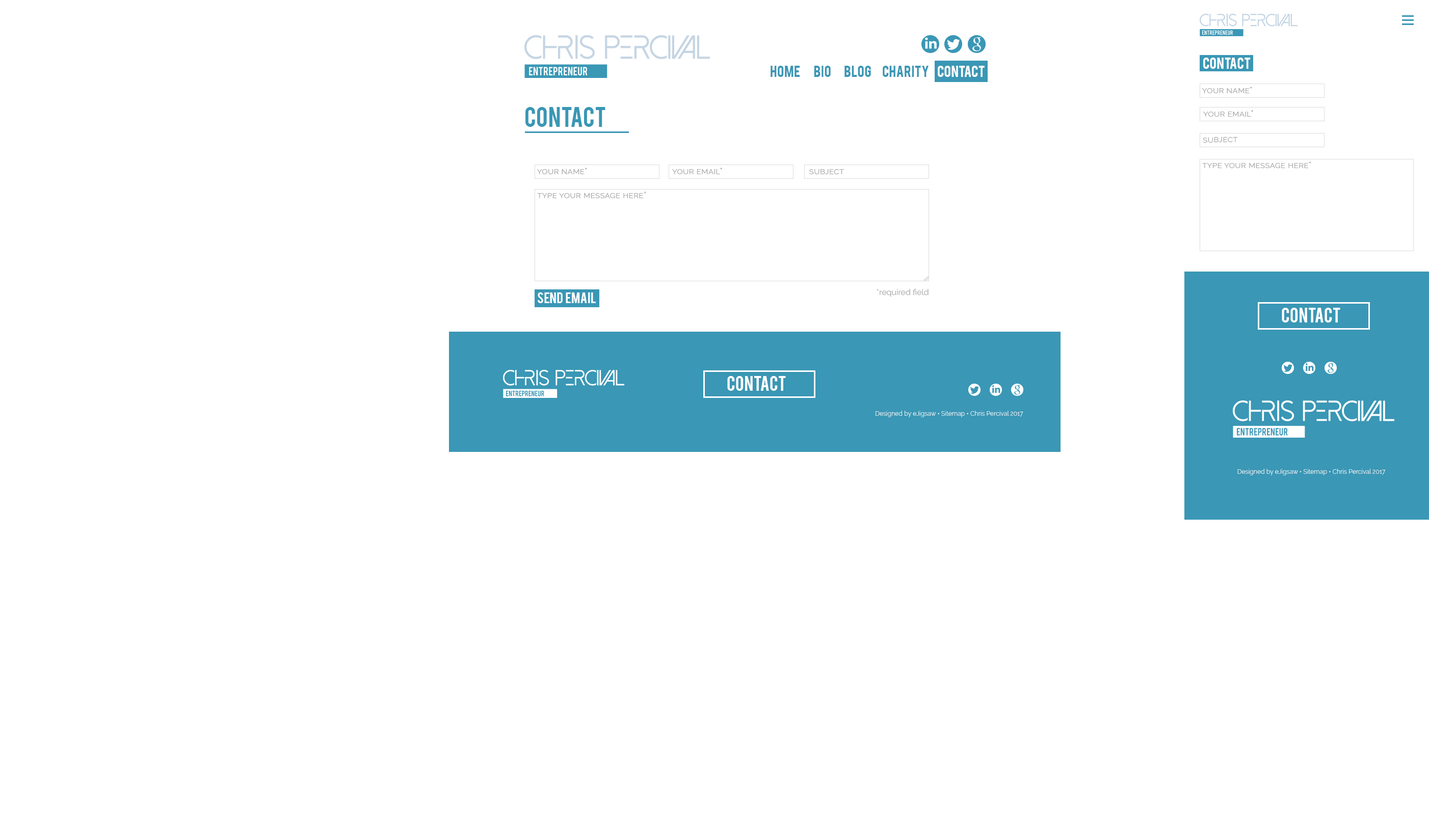
<style>
.page{position:relative;width:1429px;height:834px;background:#ffffff}
.page>*{position:absolute;margin:0}
.t1{font:12.9px "Bebas";color:#3a97b5}
.t2{font:12.9px "Bebas";color:#ffffff}
.t3{font:9.2px "Raleway-Regular";color:#aaaaaa;font-variant:small-caps}
.t4{font:22.2px "Bebas";color:#3a97b5}
.t5{font:12.2px "Bebas";color:#ffffff}
.t6{font:8.2px "Raleway-Regular";color:#aaaaaa}
.t7{font:16.1px "Bebas";color:#ffffff}
.t8{font:6.3px "Raleway-Light";color:#ffffff}
</style>
<div class="page">
<p class="t1" style="left:771px;top:66px;width:29px;height:11px">home</p>
<p class="t1" style="left:814px;top:66px;width:17px;height:11px">bio</p>
<p class="t1" style="left:845px;top:66px;width:26px;height:11px">Blog</p>
<p class="t1" style="left:883px;top:66px;width:46px;height:11px">charity</p>
<p class="t2" style="left:938px;top:66px;width:47px;height:11px">contact</p>
<p class="t2" style="left:1203px;top:58px;width:48px;height:11px">contact</p>
<p class="t3" style="left:1202px;top:87px;width:50px;height:6px">your name*</p>
<p class="t4" style="left:525px;top:107px;width:81px;height:20px">contact</p>
<p class="t3" style="left:1203px;top:110px;width:50px;height:7px">your email*</p>
<p class="t3" style="left:1203px;top:137px;width:35px;height:6px">subject</p>
<p class="t3" style="left:1202px;top:162px;width:109px;height:6px">type your message here*</p>
<p class="t3" style="left:537px;top:168px;width:50px;height:6px">your name*</p>
<p class="t3" style="left:672px;top:168px;width:50px;height:6px">your email*</p>
<p class="t3" style="left:809px;top:169px;width:35px;height:5px">subject</p>
<p class="t3" style="left:537px;top:192px;width:109px;height:6px">type your message here*</p>
<p class="t5" style="left:538px;top:293px;width:58px;height:10px">Send  email</p>
<p class="t6" style="left:877px;top:289px;width:52px;height:8px">*required field</p>
<p class="t7" style="left:1282px;top:308px;width:58px;height:15px">contact</p>
<p class="t7" style="left:727px;top:376px;width:59px;height:15px">contact</p>
<p class="t8" style="left:876px;top:411px;width:147px;height:6px">Designed by eJigsaw • Sitemap • Chris Percival 2017</p>
<p class="t8" style="left:1238px;top:469px;width:148px;height:7px">Designed by eJigsaw • Sitemap • Chris Percival 2017</p>
</div>
